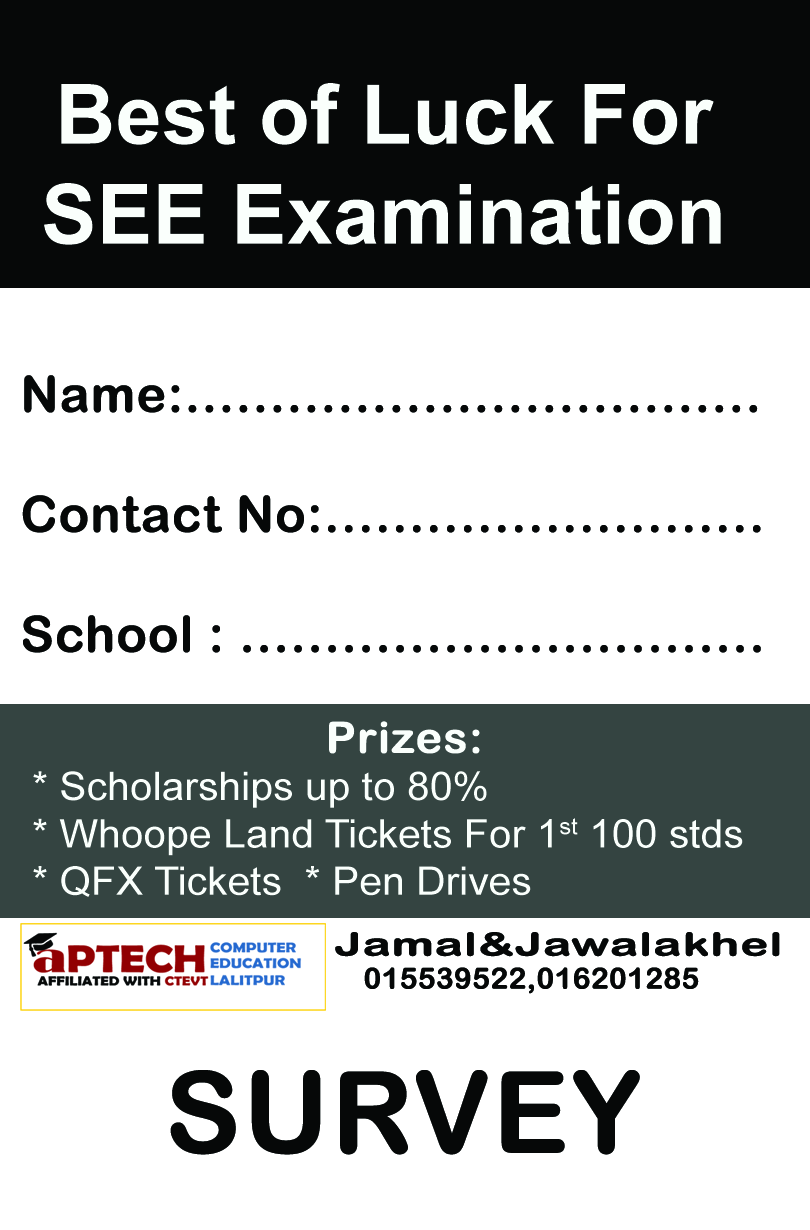
<style>
.page{position:relative;width:810px;height:1230px;background:#ffffff}
.page>*{position:absolute;margin:0}
.t1{font:83.3px "Arial-BoldMT";color:#fafffc}
.t2{font:50px "ArialRoundedMTBold";color:#060808;font-weight:bold}
.t3{font:39.4px "ArialMT";color:#fafffc;scale:1.04 1}
.t4{font:43.3px "ArialRoundedMTBold";color:#fafffc;font-weight:bold;scale:1.04 1}
.t5{font:31.8px "ArialRoundedMTBold";color:#060808;font-weight:bold;scale:1.48 1}
.t6{font:29.2px "ArialRoundedMTBold";color:#060808;font-weight:bold}
.t7{font:112.5px "ArialRoundedMTBold";color:#060808;font-weight:bold}
</style>
<div class="page">
<p class="t1" style="left:44px;top:83px;width:677px;height:162px;text-align:center">Best of Luck For <br>SEE Examination</p>
<p class="t2" style="left:22px;top:375px;width:739px;height:278px">Name:..................................<br><br>Contact No:..........................<br><br>School : ...............................</p>
<p class="t3" style="left:33px;top:721px;width:710px;height:176px;text-align:center"><span class="t4">Prizes: <br></span>* Scholarships up to 80%<br>* Whoope Land Tickets For 1st 100 stds<br>* QFX Tickets  * Pen Drives</p>
<p class="t5" style="left:335px;top:932px;width:445px;height:25px">Jamal&amp;Jawalakhel</p>
<p class="t6" style="left:364px;top:967px;width:335px;height:27px">015539522,016201285</p>
<p class="t7" style="left:170px;top:1070px;width:470px;height:85px">SURVEY</p>
</div>
